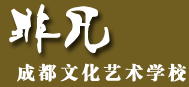
<style>
.page{position:relative;width:189px;height:87px;background:#705d20}
.page>*{position:absolute;margin:0}
.t1{font:18px "FZCSJW--GB1-0";letter-spacing:0.2em;color:#ffffff}
</style>
<div class="page">
<p class="t1" style="left:17px;top:63px;width:169px;height:19px">成都文化艺术学校</p>
</div>
